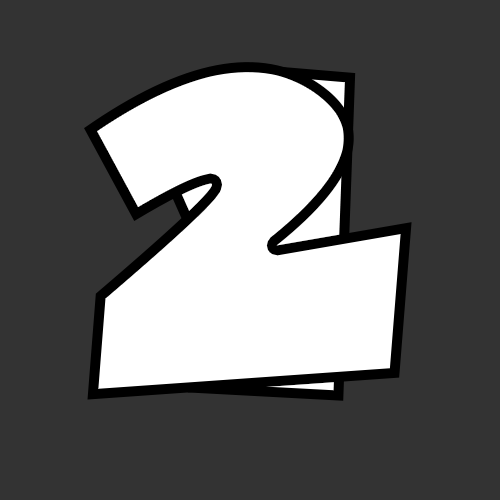
<style>
.page{position:relative;width:500px;height:500px;background:#333333}
.page>*{position:absolute;margin:0}
.t1{font:416px "Adorable";color:#ffffff}
</style>
<div class="page">
<p class="t1" style="left:84px;top:62px;width:328px;height:338px">2</p>
</div>
